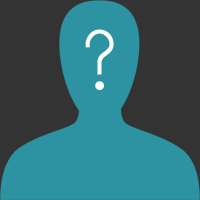
<style>
.page{position:relative;width:200px;height:200px;background:#2d92a1}
.page>*{position:absolute;margin:0}
.t1{font:80px "á??á?­á?á?±á?¬á??á?º-Regular";color:#ffffff}
</style>
<div class="page">
<p class="t1" style="left:85px;top:29px;width:29px;height:61px">?</p>
</div>
